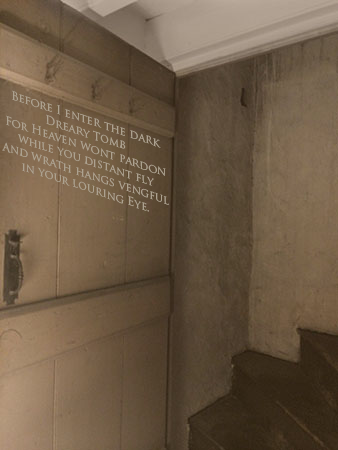
<style>
.page{position:relative;width:338px;height:450px}
.page>*{position:absolute;margin:0}
.t1{font:11.3px "TrajanPro-Regular";color:#ada290}
</style>
<div class="page">
<p class="t1" style="left:2px;top:90px;width:167px;height:122px;text-align:center;rotate:18deg">Before I enter the dark Dreary Tomb<br>For Heaven wont pardon while you distant fly<br>And wrath hangs vengful in your louring Eye.</p>
</div>
